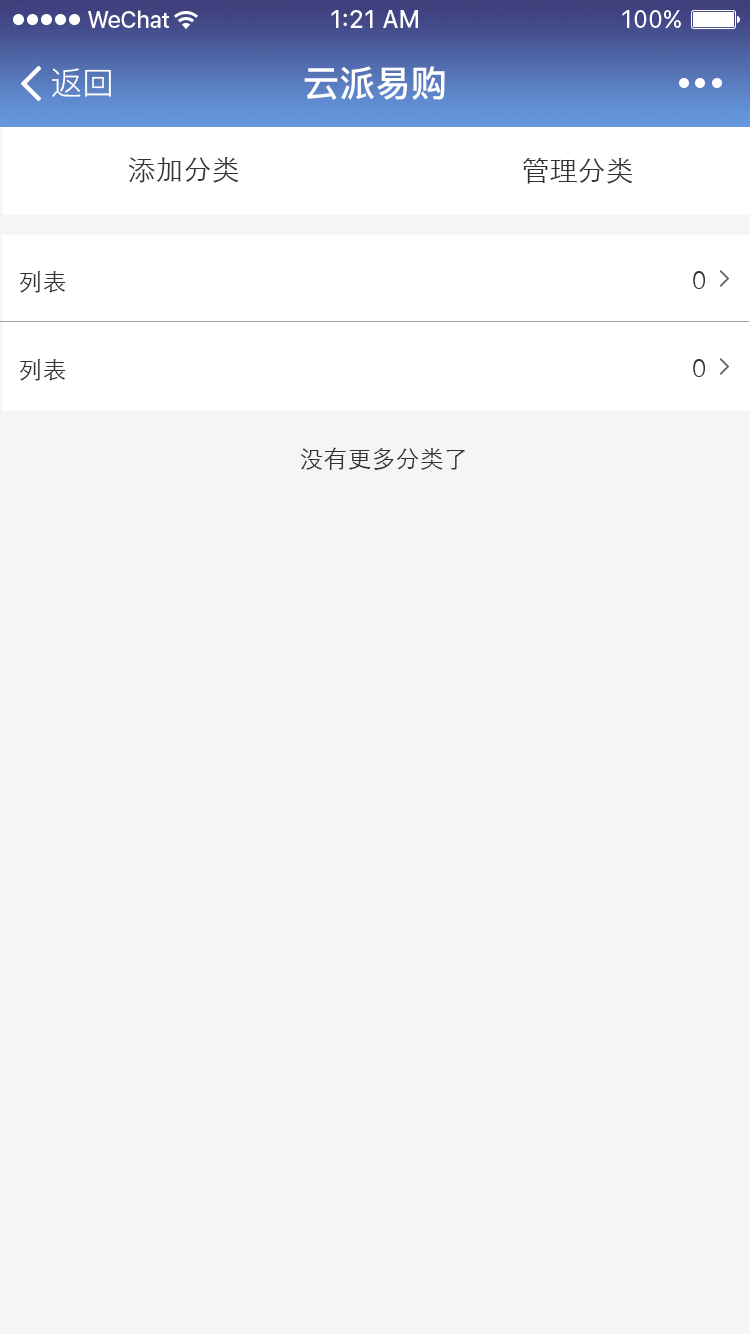
<style>
.page{position:relative;width:750px;height:1334px;background:#f4f5f6}
.page>*{position:absolute;margin:0}
.t1{font:32px "PingFang-SC-Regular";color:#ffffff}
.t2{font:36px "PingFang-SC-Bold";color:#ffffff}
.t3{font:28px "STXihei";color:#333333}
.t4{font:24px "STXihei";color:#333333}
</style>
<div class="page">
<p class="t1" style="left:52px;top:68px;width:59px;height:29px">返回</p>
<p class="t2" style="left:304px;top:66px;width:141px;height:34px">云派易购</p>
<p class="t3" style="left:128px;top:157px;width:111px;height:26px">添加分类</p>
<p class="t3" style="left:523px;top:157px;width:110px;height:27px">管理分类</p>
<p class="t4" style="left:19px;top:271px;width:47px;height:22px">列表</p>
<p class="t4" style="left:693px;top:271px;width:13px;height:18px">0</p>
<p class="t4" style="left:19px;top:359px;width:47px;height:22px">列表</p>
<p class="t4" style="left:693px;top:359px;width:13px;height:18px">0</p>
<p class="t4" style="left:301px;top:447px;width:164px;height:23px">没有更多分类了</p>
</div>
